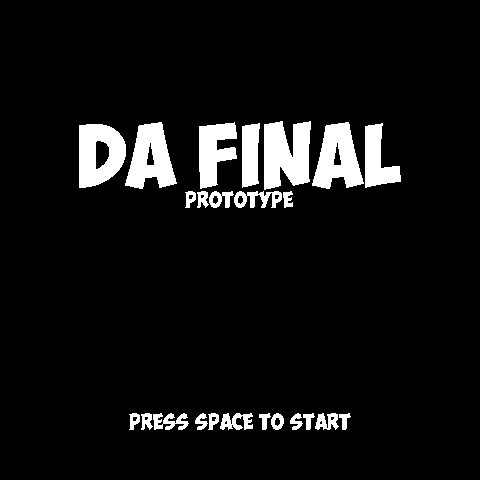
<style>
.page{position:relative;width:480px;height:480px;background:#000000}
.page>*{position:absolute;margin:0}
.t1{font:16px "ObelixPro";color:#ffffff}
.t2{font:64px "ObelixPro";color:#ffffff}
</style>
<div class="page">
<p class="t1" style="left:79px;top:121px;width:322px;height:87px;text-align:center"><span class="t2">da final<br></span>Prototype</p>
<p class="t1" style="left:129px;top:413px;width:222px;height:17px">Press SPACE TO START</p>
</div>
